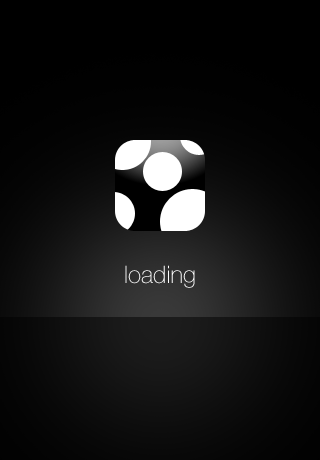
<style>
.page{position:relative;width:320px;height:460px}
.page>*{position:absolute;margin:0}
.t1{font:24px "HelveticaNeueLTPro-Th";color:#ffffff}
</style>
<div class="page">
<p class="t1" style="left:125px;top:265px;width:70px;height:23px">loading</p>
</div>
